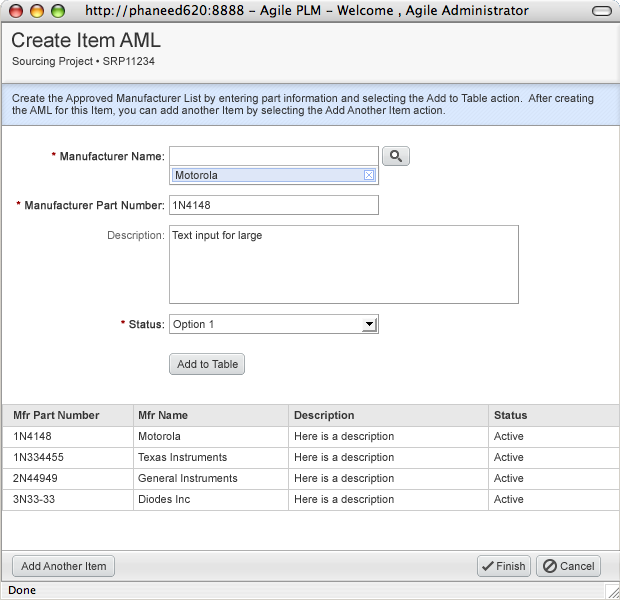
<style>
.page{position:relative;width:620px;height:600px;background:#ffffff}
.page>*{position:absolute;margin:0}
.t1{font:20px "ArialMT";color:#333333}
.t2{font:11px "ArialMT";color:#333333}
.t3{font:11px/12px "ArialMT";color:#333333}
.t4{font:11px "ArialMT";color:#333333;font-weight:bold}
.t5{font:11px "ArialMT";color:#990000;font-weight:bold}
.t6{font:11px "ArialMT";color:#666666}
.t7{font:11px/21px "ArialMT";color:#333333}
.t8{font:11px/21px "Arial-BoldMT";color:#333333}
</style>
<div class="page">
<p class="t1" style="left:12px;top:32px;width:149px;height:16px">Create Item AML</p>
<p class="t2" style="left:12px;top:57px;width:143px;height:11px">Sourcing Project • SRP11234</p>
<p class="t3" style="left:12px;top:94px;width:582px;height:23px">Create the Approved Manufacturer List by entering part information and selecting the Add to Table action.  After creating<br>the AML for this Item, you can add another Item by selecting the Add Another Item action.</p>
<p class="t4" style="left:51px;top:152px;width:113px;height:9px"><span class="t5">* </span>Manufacturer Name:</p>
<p class="t2" style="left:176px;top:171px;width:42px;height:8px">Motorola</p>
<p class="t4" style="left:16px;top:201px;width:148px;height:9px"><span class="t5">* </span>Manufacturer Part Number:</p>
<p class="t2" style="left:173px;top:201px;width:37px;height:8px">1N4148</p>
<p class="t6" style="left:108px;top:231px;width:56px;height:11px">Description:</p>
<p class="t2" style="left:172px;top:231px;width:90px;height:11px">Text input for large</p>
<p class="t4" style="left:121px;top:320px;width:43px;height:9px"><span class="t5">*</span> Status:</p>
<p class="t2" style="left:173px;top:320px;width:40px;height:11px">Option 1</p>
<p class="t2" style="left:177px;top:360px;width:61px;height:8px">Add to Table</p>
<p class="t7" style="left:13px;top:411px;width:87px;height:92px"><span class="t8">Mfr Part Number<br></span>1N4148<br>1N334455<br>2N44949<br>3N33-33</p>
<p class="t7" style="left:138px;top:411px;width:100px;height:92px"><span class="t8">Mfr Name<br></span>Motorola<br>Texas Instruments<br>General Instruments<br>Diodes Inc</p>
<p class="t7" style="left:294px;top:411px;width:100px;height:95px"><span class="t8">Description<br></span>Here is a description<br>Here is a description<br>Here is a description<br>Here is a description</p>
<p class="t7" style="left:494px;top:411px;width:33px;height:92px"><span class="t8">Status<br></span>Active<br>Active<br>Active<br>Active</p>
<p class="t2" style="left:21px;top:562px;width:85px;height:8px">Add Another Item</p>
<p class="t2" style="left:497px;top:562px;width:28px;height:8px">Finish</p>
<p class="t2" style="left:560px;top:562px;width:34px;height:8px">Cancel</p>
</div>
